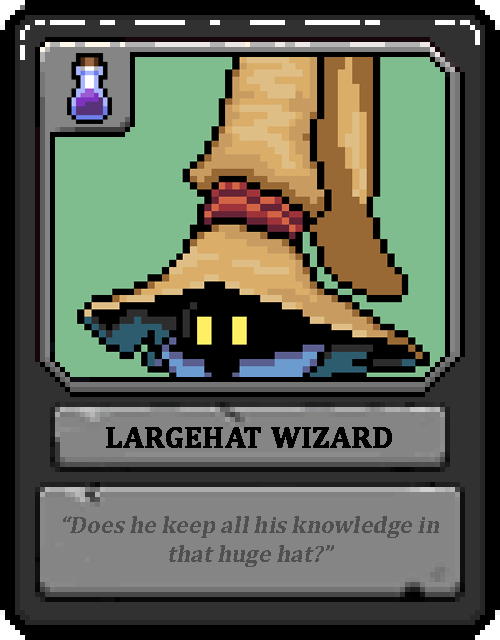
<style>
.page{position:relative;width:500px;height:640px;background:#000000}
.page>*{position:absolute;margin:0}
.t1{font:30px "Cambria-Bold";color:#000000;text-transform:uppercase;font-weight:bold}
.t2{font:24px "Cambria-Bold";color:#505050;font-style:italic}
</style>
<div class="page">
<p class="t1" style="left:106px;top:427px;width:286px;height:21px">Largehat Wizard</p>
<p class="t2" style="left:63px;top:516px;width:376px;height:51px;text-align:center">“Does he keep all his knowledge in that huge hat?”</p>
</div>
